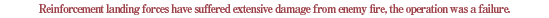
<style>
.page{position:relative;width:549px;height:18px;background:#ffffff}
.page>*{position:absolute;margin:0}
.t1{font:12px "RyuminPro-ExBold";letter-spacing:-0.08em;color:#9e444c;scale:0.9 1}
</style>
<div class="page">
<p class="t1" style="left:38px;top:4px;width:472px;height:11px">Reinforcement landing forces have suffered extensive damage from enemy fire, the operation was a failure.</p>
</div>
